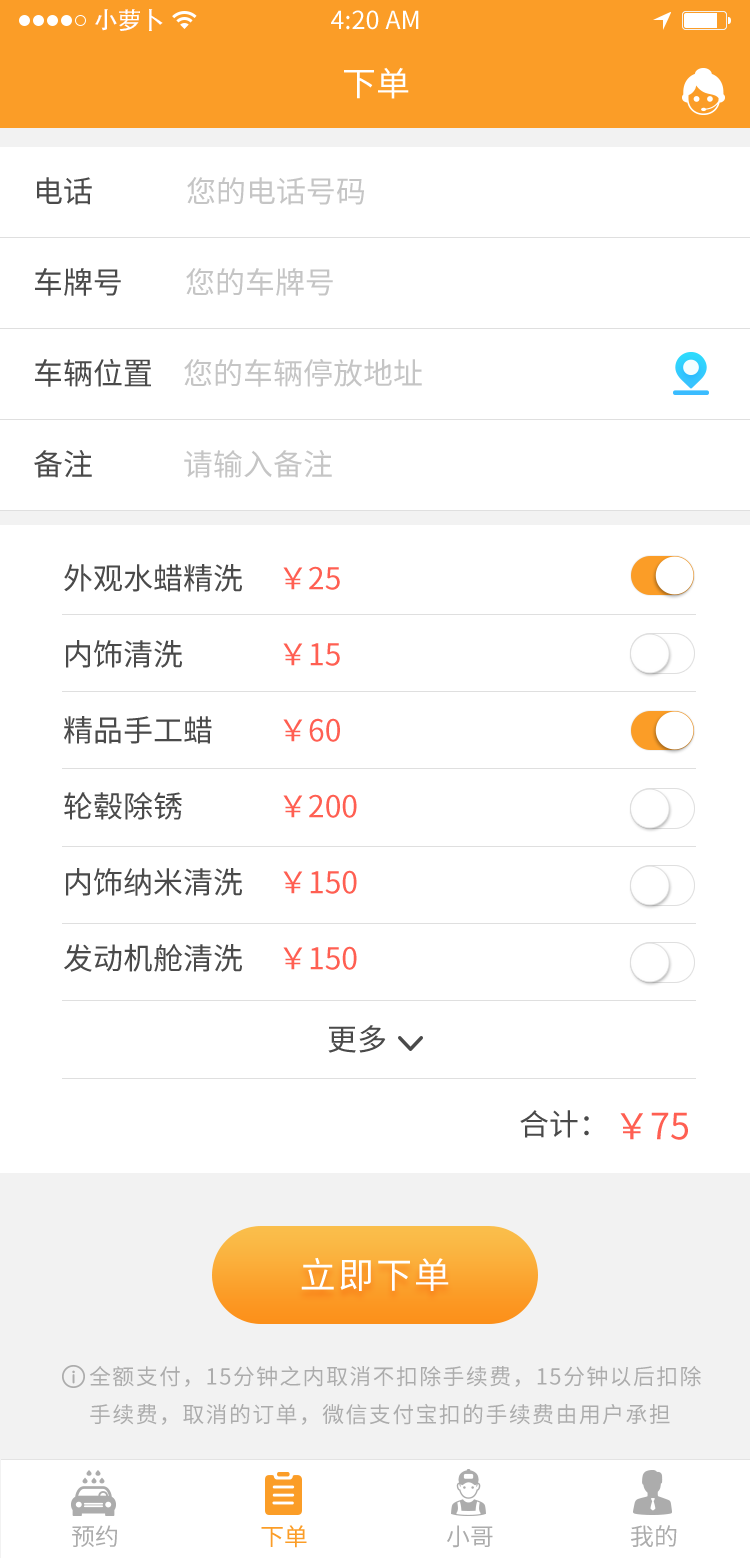
<style>
.page{position:relative;width:750px;height:1558px;background:#ffffff}
.page>*{position:absolute;margin:0}
.t1{font:24px "AdobeHeitiStd-Regular";color:#ffffff}
.t2{font:25px "SourceHanSansCN-Regular";color:#ffffff}
.t3{font:34px "SourceHanSansCN-Regular";color:#ffffff}
.t4{font:30px "SourceHanSansCN-Regular";color:#4a4a4a}
.t5{font:30px "SourceHanSansCN-Regular";color:#c5c5c5}
.t6{font:30px/76px "SourceHanSansCN-Regular";color:#4a4a4a}
.t7{font:30px/76px "SourceHanSansCN-Regular";color:#ff5f52}
.t8{font:36px "SourceHanSansCN-Regular";color:#ff5f52}
.t9{font:36px "SourceHanSansCN-Regular";letter-spacing:0.06em;color:#ffffff}
.t10{font:22px/38px "SourceHanSansCN-Regular";letter-spacing:0.06em;color:#acacac}
.t11{font:24px "SourceHanSansCN-Regular";color:#acacac}
.t12{font:24px "SourceHanSansCN-Regular";color:#fb9d27}
</style>
<div class="page">
<p class="t1" style="left:95px;top:9px;width:68px;height:22px">小萝卜</p>
<p class="t2" style="left:331px;top:10px;width:88px;height:20px">4:20 AM</p>
<p class="t3" style="left:344px;top:67px;width:65px;height:32px">下单</p>
<p class="t4" style="left:37px;top:177px;width:55px;height:28px">电话</p>
<p class="t5" style="left:187px;top:177px;width:177px;height:28px">您的电话号码</p>
<p class="t4" style="left:35px;top:268px;width:86px;height:28px">车牌号</p>
<p class="t5" style="left:186px;top:268px;width:147px;height:28px">您的车牌号</p>
<p class="t4" style="left:35px;top:358px;width:116px;height:29px">车辆位置</p>
<p class="t5" style="left:184px;top:359px;width:238px;height:28px">您的车辆停放地址</p>
<p class="t4" style="left:34px;top:450px;width:58px;height:28px">备注</p>
<p class="t5" style="left:184px;top:450px;width:148px;height:28px">请输入备注</p>
<p class="t6" style="left:64px;top:564px;width:178px;height:408px">外观水蜡精洗<br>内饰清洗<br>精品手工蜡<br>轮毂除锈<br>内饰纳米清洗<br>发动机舱清洗</p>
<p class="t7" style="left:283px;top:566px;width:74px;height:404px">￥25<br>￥15<br>￥60<br>￥200<br>￥150<br>￥150</p>
<p class="t4" style="left:328px;top:1025px;width:58px;height:28px">更多</p>
<p class="t4" style="left:520px;top:1110px;width:69px;height:28px">合计：</p>
<p class="t8" style="left:620px;top:1112px;width:68px;height:28px">￥75</p>
<p class="t9" style="left:301px;top:1257px;width:148px;height:34px">立即下单</p>
<p class="t10" style="left:89px;top:1366px;width:612px;height:59px">全额支付，15分钟之内取消不扣除手续费，15分钟以后扣除手续费，取消的订单，微信支付宝扣的手续费由用户承担</p>
<p class="t11" style="left:72px;top:1525px;width:45px;height:22px">预约</p>
<p class="t12" style="left:261px;top:1525px;width:46px;height:23px">下单</p>
<p class="t11" style="left:447px;top:1525px;width:46px;height:23px">小哥</p>
<p class="t11" style="left:631px;top:1525px;width:46px;height:22px">我的</p>
</div>
